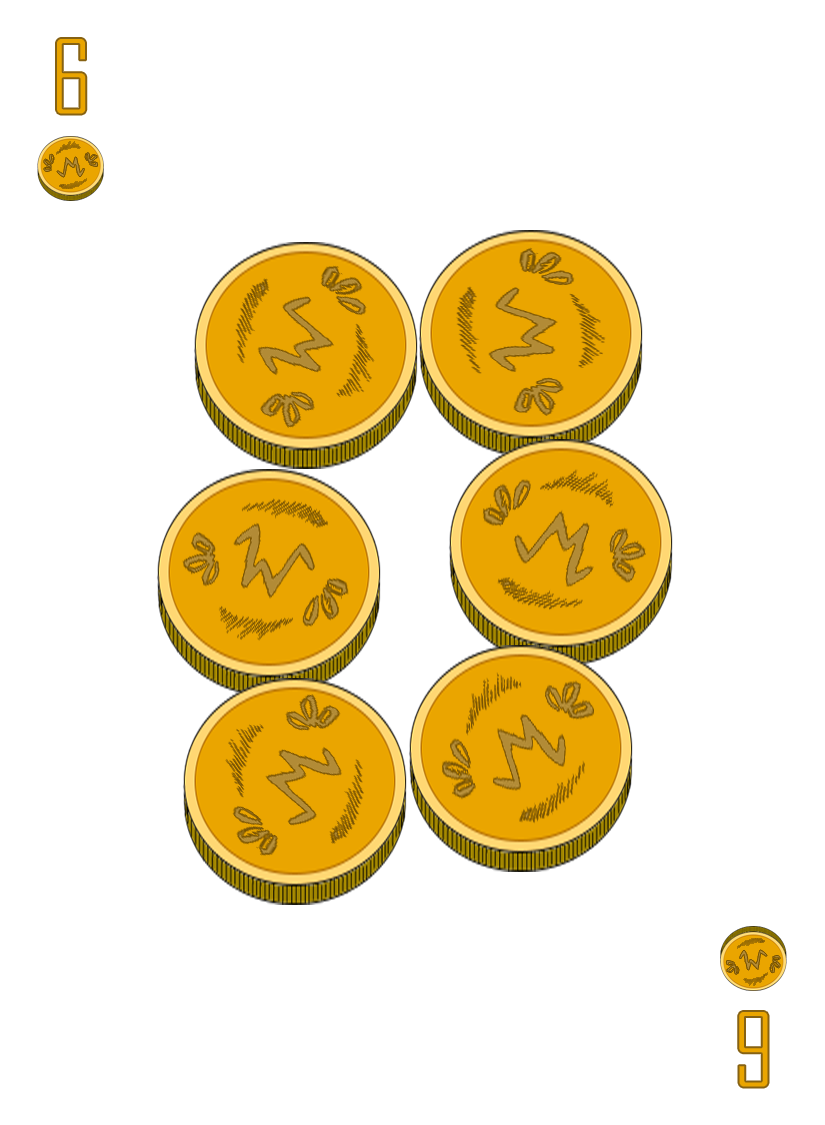
<style>
.page{position:relative;width:825px;height:1125px;background:#ffffff}
.page>*{position:absolute;margin:0}
.t1{font:100px "AgencyFB-Reg";color:#eaa500}
</style>
<div class="page">
<p class="t1" style="left:56px;top:38px;width:31px;height:77px">6</p>
<p class="t1" style="left:738px;top:1011px;width:31px;height:77px;rotate:180deg">6</p>
</div>
